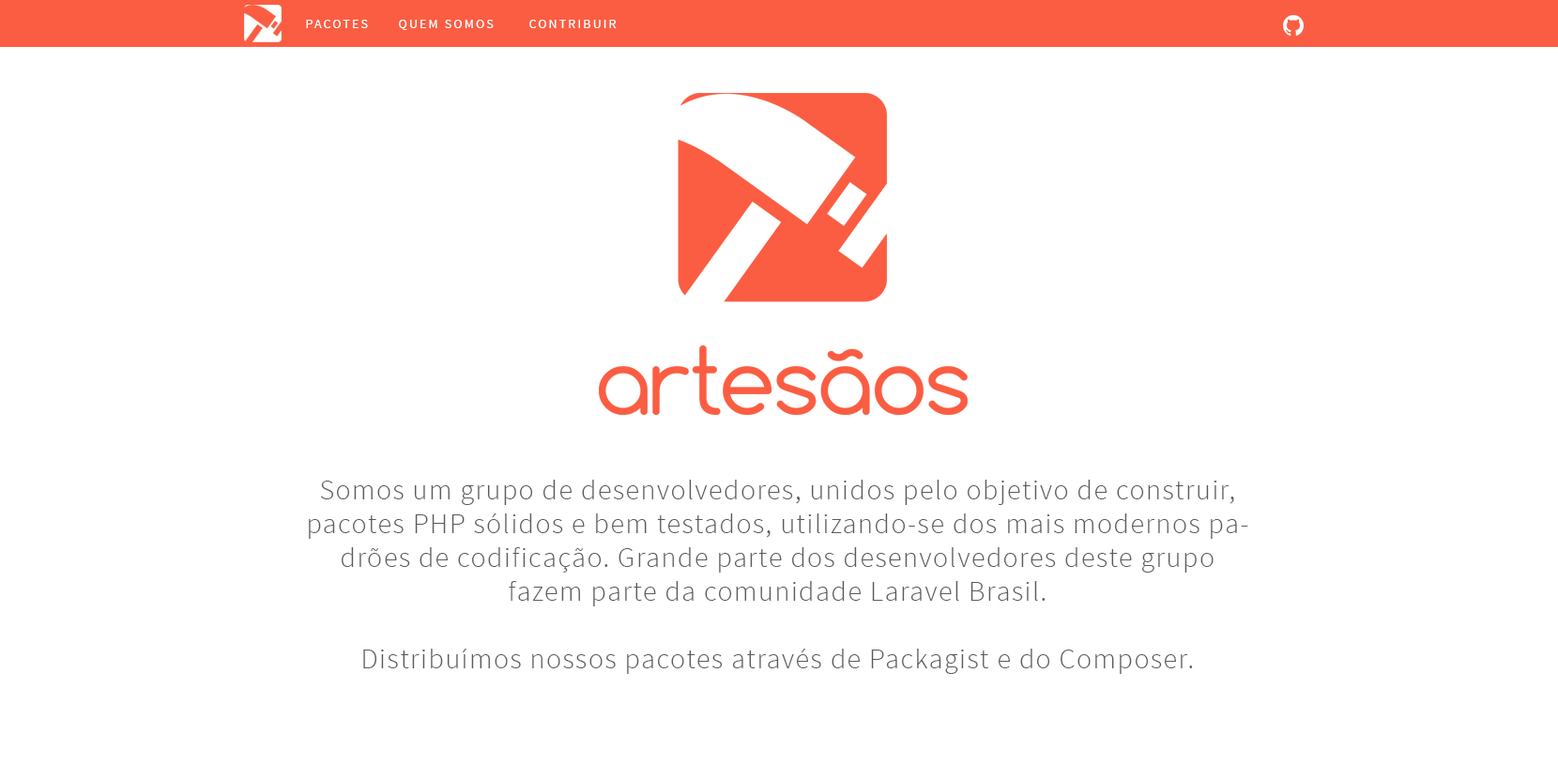
<style>
.page{position:relative;width:1558px;height:765px;background:#ffffff}
.page>*{position:absolute;margin:0}
.t1{font:13.1px "SourceSansPro-Regular";letter-spacing:0.15em;color:#ffffff}
.t2{font:28.2px "SourceSansPro-Light";letter-spacing:0.05em;color:#5a5a5a}
.t3{font:28.2px "SourceSansPro-Light";color:#5a5a5a}
</style>
<div class="page">
<p class="t1" style="left:306px;top:20px;width:62px;height:8px">PACOTES</p>
<p class="t1" style="left:399px;top:20px;width:95px;height:10px">QUEM SOMOS</p>
<p class="t1" style="left:529px;top:20px;width:88px;height:8px">CONTRIBUIR</p>
<p class="t2" style="left:309px;top:480px;width:940px;height:194px;text-align:center"><span class="t3"><br></span>Somos um grupo de desenvolvedores, unidos pelo objetivo de construir, pacotes PHP sólidos e bem testados, utilizando-se dos mais modernos padrões de codificação. Grande parte dos desenvolvedores deste grupo fazem parte da comunidade Laravel Brasil.<br><br>Distribuímos nossos pacotes através de Packagist e do Composer.</p>
</div>
